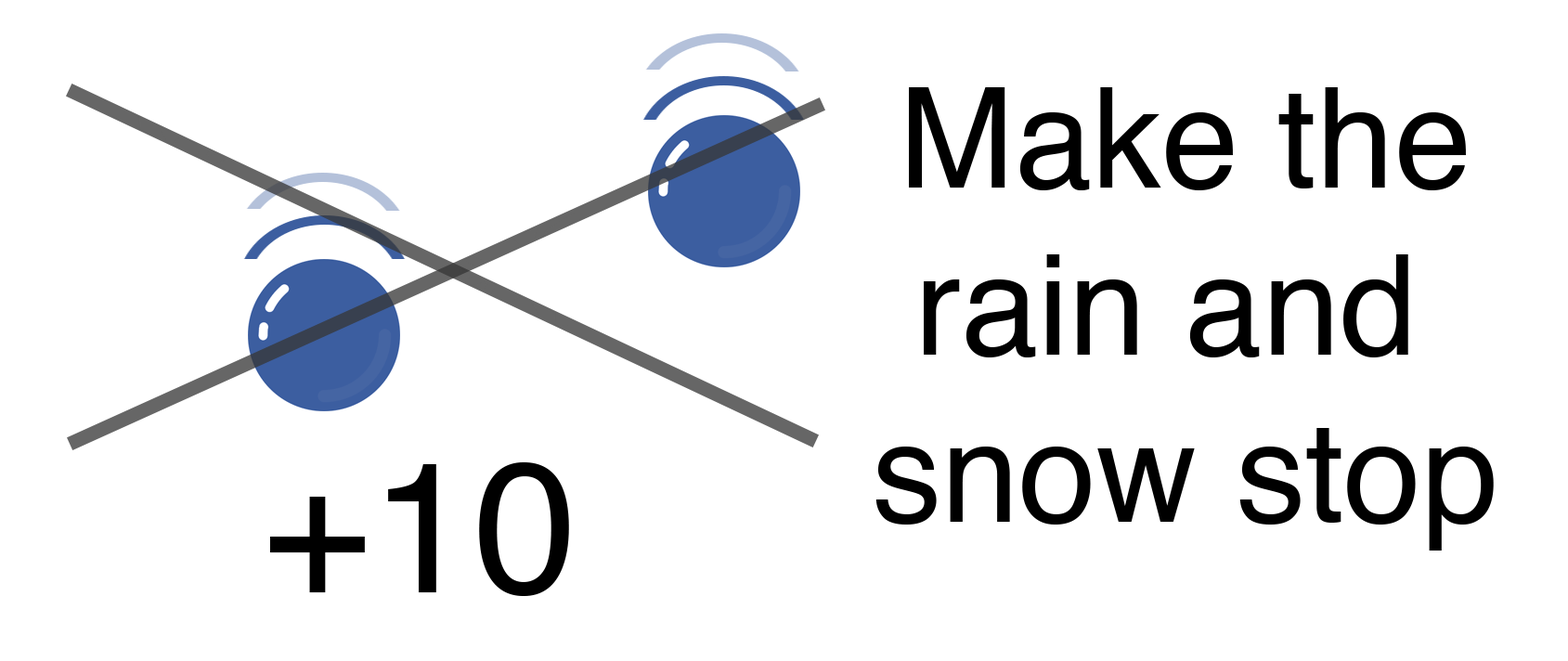
<style>
.page{position:relative;width:1568px;height:661px;background:#ffffff}
.page>*{position:absolute;margin:0}
.t1{font:139.3px "Helvetica";color:#000000}
.t2{font:185.7px "Helvetica";color:#000000}
</style>
<div class="page">
<p class="t1" style="left:875px;top:87px;width:619px;height:464px;text-align:center">Make the<br>rain and <br>snow stop</p>
<p class="t2" style="left:269px;top:462px;width:300px;height:134px">+10</p>
</div>
